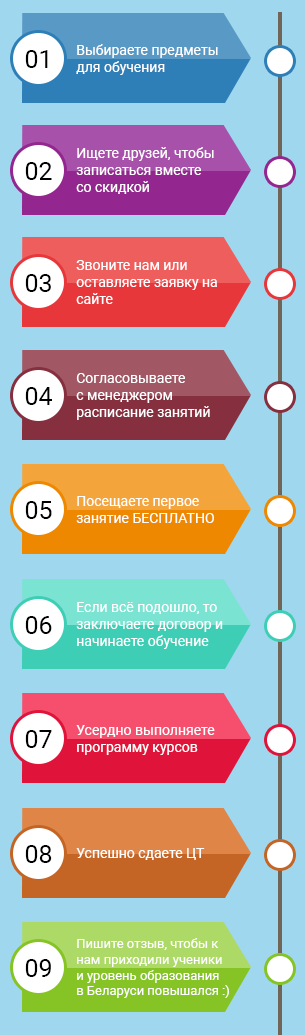
<style>
.page{position:relative;width:305px;height:1035px;background:#9fd7ee}
.page>*{position:absolute;margin:0}
.t1{font:25px "Roboto-Regular";color:#000000}
.t2{font:14px "Roboto-Regular";color:#ffffff}
.t3{font:13px "Roboto-Regular";color:#ffffff}
</style>
<div class="page">
<p class="t1" style="left:25px;top:50px;width:23px;height:18px">01</p>
<p class="t2" style="left:76px;top:44px;width:142px;height:31px">Выбираете предметы<br>для обучения</p>
<p class="t2" style="left:76px;top:147px;width:138px;height:47px">Ищете друзей, чтобы <br>записаться вместе <br>со скидкой</p>
<p class="t1" style="left:25px;top:162px;width:27px;height:18px">02</p>
<p class="t2" style="left:76px;top:260px;width:141px;height:44px">Звоните нам или <br>оставляете заявку на <br>сайте</p>
<p class="t1" style="left:25px;top:274px;width:26px;height:18px">03</p>
<p class="t2" style="left:76px;top:373px;width:134px;height:47px">Согласовываете <br>с менеджером<br>расписание занятий</p>
<p class="t1" style="left:25px;top:387px;width:27px;height:18px">04</p>
<p class="t2" style="left:76px;top:496px;width:138px;height:27px">Посещаете первое <br>занятие БЕСПЛАТНО</p>
<p class="t1" style="left:25px;top:501px;width:27px;height:18px">05</p>
<p class="t2" style="left:76px;top:602px;width:147px;height:47px">Если всё подошло, то <br>заключаете договор и <br>начинаете обучение</p>
<p class="t1" style="left:25px;top:616px;width:27px;height:18px">06</p>
<p class="t2" style="left:76px;top:725px;width:139px;height:30px">Усердно выполняете <br>программу курсов</p>
<p class="t1" style="left:25px;top:730px;width:27px;height:18px">07</p>
<p class="t1" style="left:25px;top:845px;width:27px;height:18px">08</p>
<p class="t2" style="left:76px;top:848px;width:129px;height:12px">Успешно сдаете ЦТ</p>
<p class="t3" style="left:77px;top:938px;width:152px;height:60px">Пишите отзыв, чтобы к <br>нам приходили ученики <br>и уровень образования <br>в Беларуси повышался :)</p>
<p class="t1" style="left:25px;top:959px;width:26px;height:18px">09</p>
</div>
